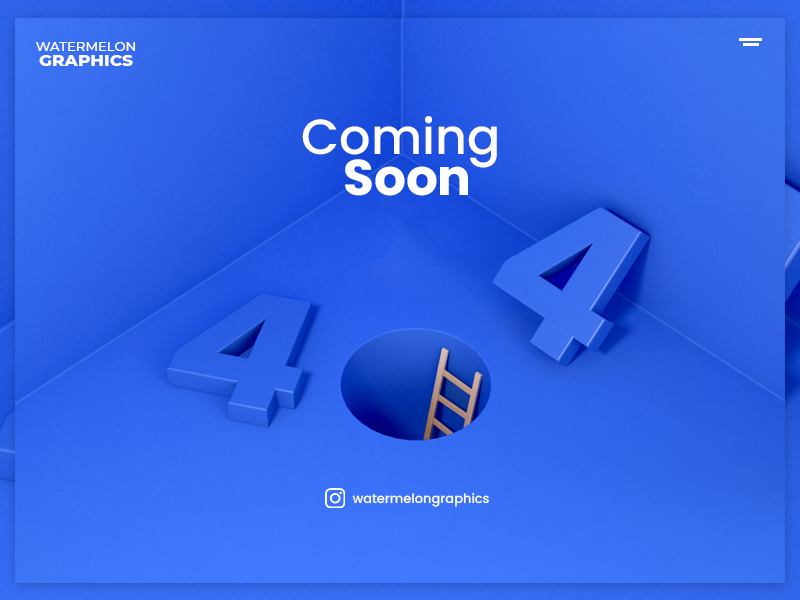
<style>
.page{position:relative;width:800px;height:600px}
.page>*{position:absolute;margin:0}
.t1{font:13.2px/15.1px "Montserrat-Medium";color:#fefefe}
.t2{font:16.9px/15.1px "Montserrat-ExtraBold";color:#fefefe}
.t3{font:49.3px/34.6px "Poppins-Medium";color:#fefefe}
.t4{font:50.1px/40.6px "Poppins-Bold";color:#fefefe}
.t5{font:13px "Poppins-Medium";color:#fefefe}
</style>
<div class="page">
<p class="t1" style="left:36px;top:42px;width:99px;height:24px;text-align:center">WATERMELON<br><span class="t2">GRAPHICS</span></p>
<p class="t3" style="left:302px;top:116px;width:195px;height:80px;text-align:center">Coming <br><span class="t4">Soon</span></p>
<p class="t5" style="left:352px;top:493px;width:137px;height:14px">watermelongraphics</p>
</div>
